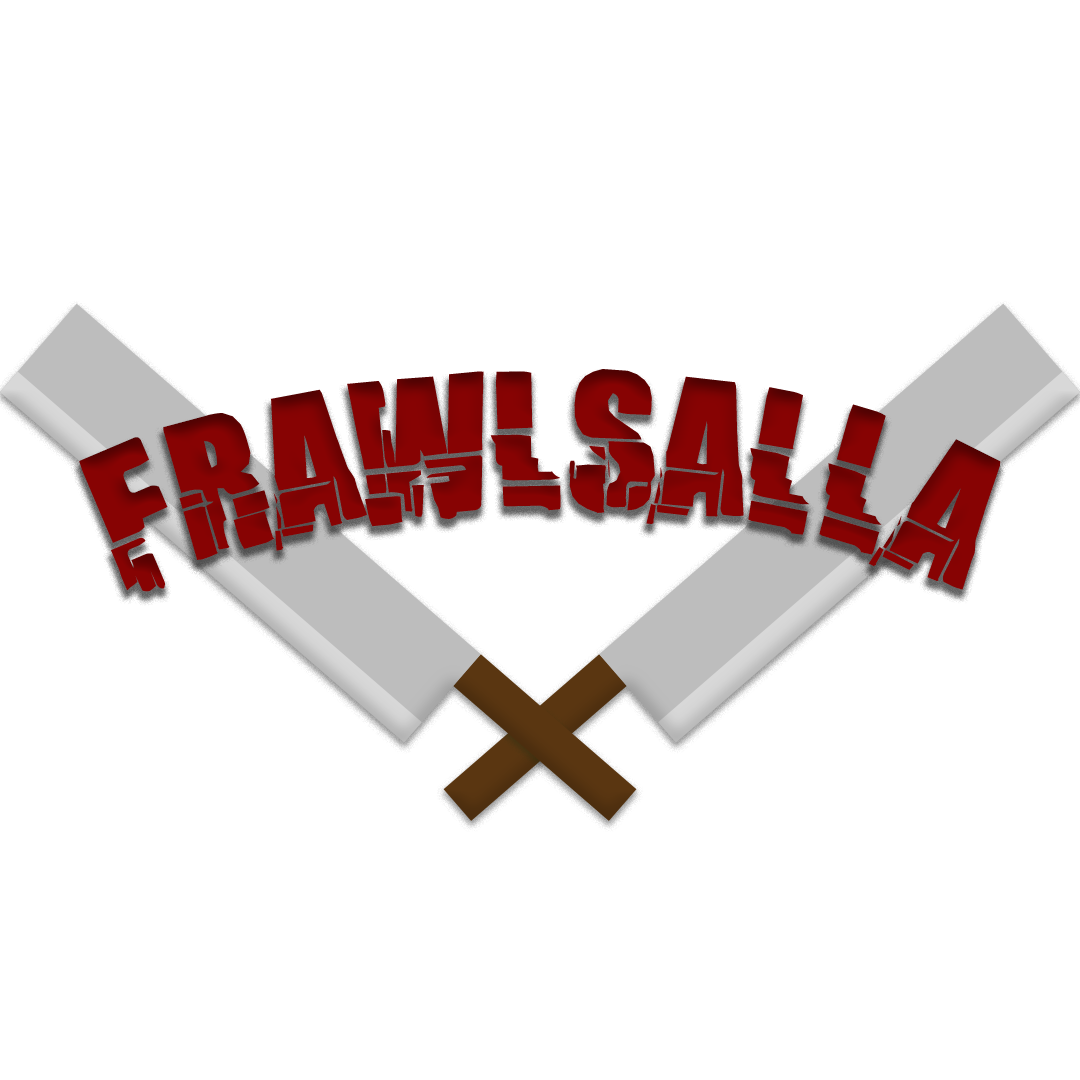
<style>
.page{position:relative;width:1080px;height:1080px;background:#ffffff}
.page>*{position:absolute;margin:0}
.t1{font:200px "Breakaway";color:#870303}
</style>
<div class="page">
<p class="t1" style="left:79px;top:369px;width:922px;height:223px;rotate:-2deg">FRAWLSALLA</p>
</div>
